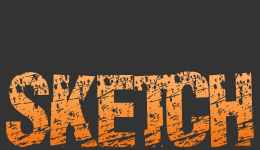
<style>
.page{position:relative;width:260px;height:150px;background:#333333}
.page>*{position:absolute;margin:0}
.t1{font:73.4px "PaintScratch";scale:0.65 1}
</style>
<div class="page">
<p class="t1" style="left:6px;top:71px;width:248px;height:77px">SKETCH</p>
</div>
